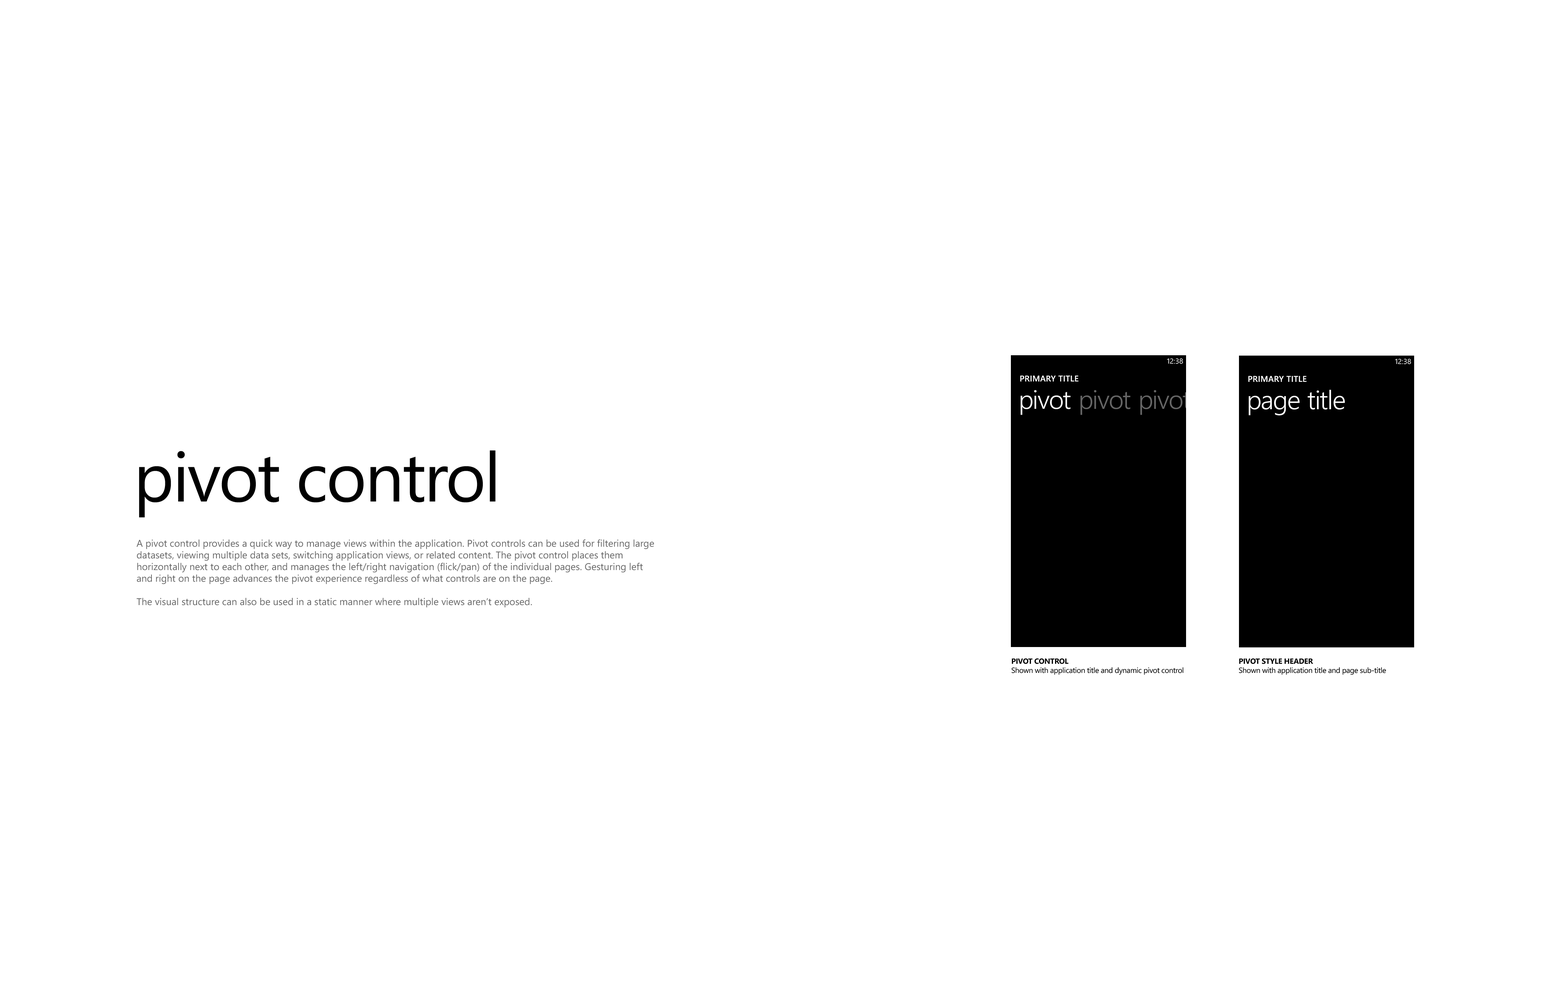
<style>
.page{position:relative;width:1551px;height:1003px;background:#ffffff}
.page>*{position:absolute;margin:0}
.t1{font:7.3px "SegoeWP";color:#ffffff}
.t2{font:8.3px "SegoeWP-Semibold";letter-spacing:0.025em;color:#ffffff;text-transform:uppercase}
.t3{font:26.3px "SegoeWP-SemiLight";letter-spacing:-0.01em;color:#ffffff}
.t4{font:26.3px "SegoeWP-SemiLight";letter-spacing:-0.01em;color:#666666}
.t5{font:69.1px "SegoeWP";letter-spacing:-0.025em;color:#000000}
.t6{font:9.7px "SegoeWP";color:#666666}
.t7{font:7.6px "SegoeWP";letter-spacing:-0.025em;color:#000000}
.t8{font:7.6px "SegoeWP-Bold";letter-spacing:-0.025em;color:#000000;text-transform:uppercase}
</style>
<div class="page">
<p class="t1" style="left:1167px;top:358px;width:16px;height:6px">12:38</p>
<p class="t1" style="left:1395px;top:359px;width:16px;height:5px">12:38</p>
<p class="t2" style="left:1020px;top:375px;width:58px;height:7px">primary title</p>
<p class="t2" style="left:1248px;top:376px;width:58px;height:6px">primary title</p>
<p class="t3" style="left:1248px;top:390px;width:97px;height:26px">page title</p>
<p class="t3" style="left:1020px;top:390px;width:51px;height:25px">pivot</p>
<p class="t4" style="left:1080px;top:390px;width:50px;height:25px">pivot</p>
<p class="t4" style="left:1140px;top:390px;width:50px;height:25px">pivot</p>
<p class="t5" style="left:139px;top:451px;width:356px;height:67px">pivot control</p>
<p class="t6" style="left:136px;top:540px;width:518px;height:68px">A pivot control provides a quick way to manage views within the application. Pivot controls can be used for filtering large datasets, viewing multiple data sets, switching application views, or related content. The pivot control places them horizontally next to each other, and manages the left/right navigation (flick/pan) of the individual pages. Gesturing left and right on the page advances the pivot experience regardless of what controls are on the page.<br><br>The visual structure can also be used in a static manner where multiple views aren’t exposed.</p>
<p class="t7" style="left:1011px;top:659px;width:172px;height:16px"><span class="t8">PIVOT CONTROL<br></span>Shown with application title and dynamic pivot control</p>
<p class="t7" style="left:1239px;top:659px;width:147px;height:16px"><span class="t8">PIVOT STYLE HEADER<br></span>Shown with application title and page sub-title</p>
</div>
